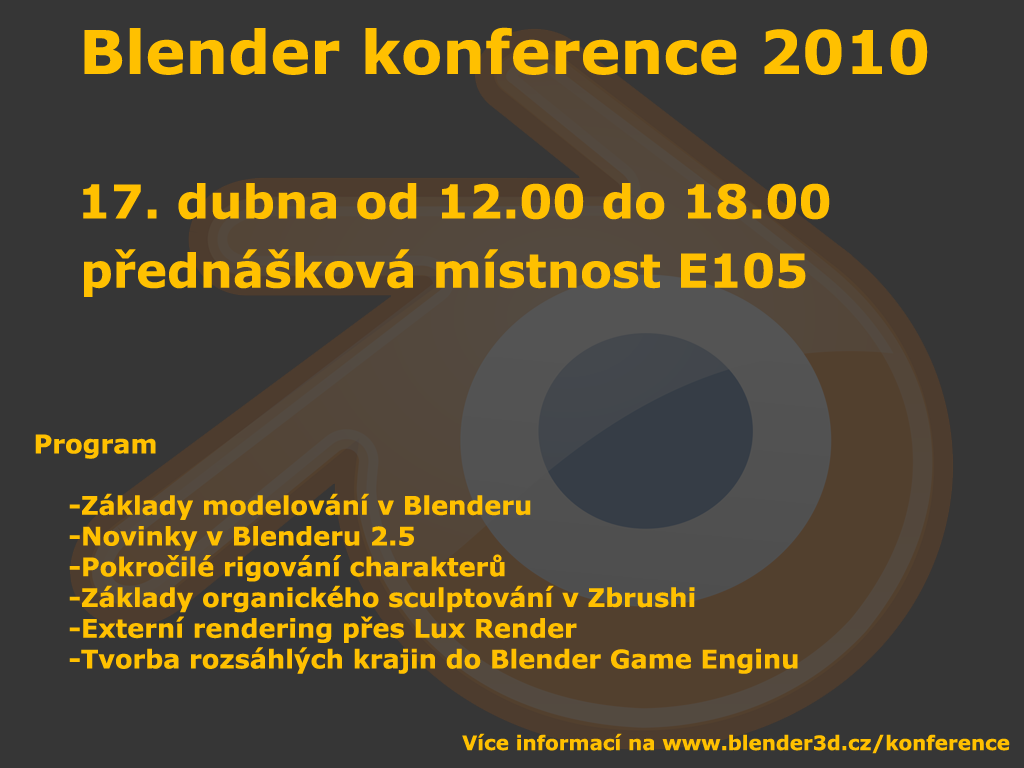
<style>
.page{position:relative;width:1024px;height:768px;background:#363636}
.page>*{position:absolute;margin:0}
.t1{font:60.2px "Verdana-Bold";color:#ffc000}
.t2{font:46.7px "Verdana-Bold";color:#ffc000}
.t3{font:25.6px "Verdana-Bold";color:#ffc000}
.t4{font:19.9px "Verdana-Bold";color:#ffc000}
</style>
<div class="page">
<p class="t1" style="left:84px;top:27px;width:844px;height:48px">Blender konference 2010</p>
<p class="t2" style="left:83px;top:183px;width:747px;height:37px">17. dubna od 12.00 do 18.00</p>
<p class="t2" style="left:84px;top:249px;width:722px;height:48px">přednášková místnost E105</p>
<p class="t3" style="left:35px;top:434px;width:763px;height:240px">Program<br><br>    -Základy modelování v Blenderu<br>    -Novinky v Blenderu 2.5<br>    -Pokročilé rigování charakterů<br>    -Základy organického sculptování v Zbrushi<br>    -Externí rendering přes Lux Render<br>    -Tvorba rozsáhlých krajin do Blender Game Enginu</p>
<p class="t4" style="left:462px;top:733px;width:548px;height:21px">Více informací na www.blender3d.cz/konference</p>
</div>
